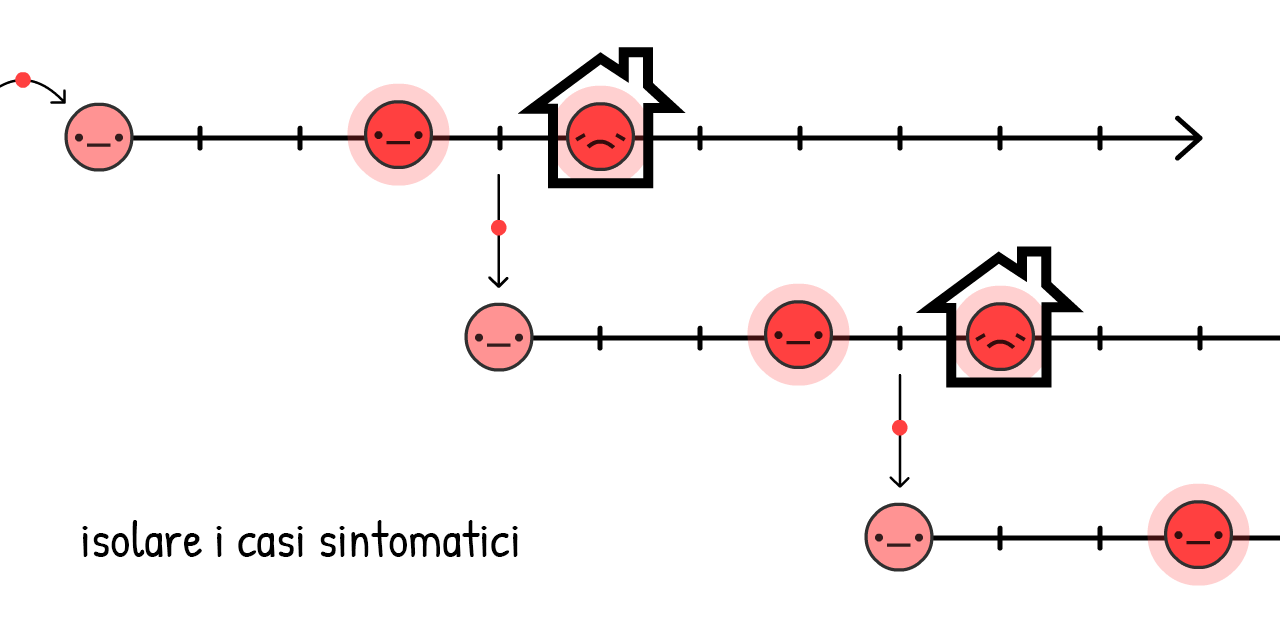
<style>
.page{position:relative;width:1280px;height:640px;background:#ffffff}
.page>*{position:absolute;margin:0}
.t1{font:50px "PatrickHand-Regular";color:#000000}
</style>
<div class="page">
<p class="t1" style="left:82px;top:520px;width:436px;height:37px">isolare i casi sintomatici</p>
</div>
